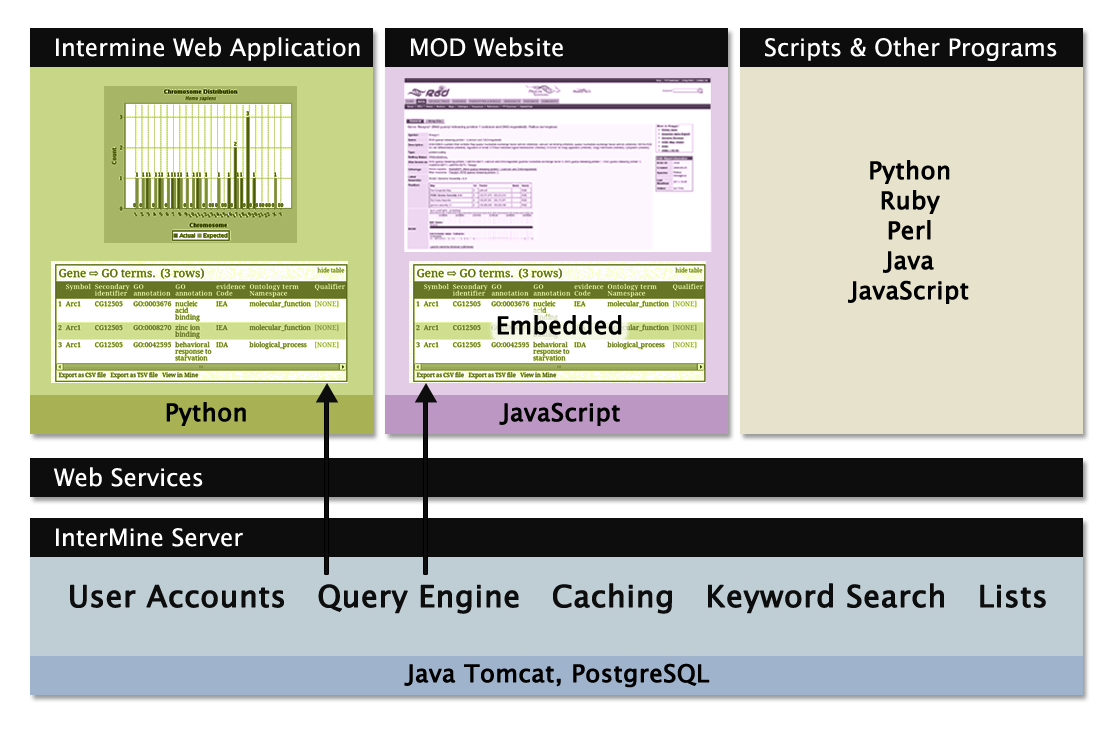
<style>
.page{position:relative;width:1110px;height:739px;background:#ffffff}
.page>*{position:absolute;margin:0}
.t1{font:24px "LucidaGrande";color:#ffffff}
.t2{font:24px/30px "LucidaGrande";color:#000000;font-weight:bold}
.t3{font:24px "LucidaGrande";color:#000000;font-weight:bold}
.t4{font:30px "LucidaGrande";color:#0d0d0d;font-weight:bold}
</style>
<div class="page">
<p class="t1" style="left:56px;top:37px;width:304px;height:24px">Intermine Web Application</p>
<p class="t1" style="left:411px;top:37px;width:152px;height:20px">MOD Website</p>
<p class="t1" style="left:765px;top:37px;width:292px;height:24px">Scripts &amp; Other Programs</p>
<p class="t2" style="left:848px;top:160px;width:121px;height:144px;text-align:center">Python<br>Ruby<br>Perl<br>Java<br>JavaScript</p>
<p class="t3" style="left:497px;top:315px;width:125px;height:20px">Embedded</p>
<p class="t3" style="left:166px;top:402px;width:80px;height:24px">Python</p>
<p class="t3" style="left:499px;top:402px;width:121px;height:24px">JavaScript</p>
<p class="t1" style="left:54px;top:467px;width:149px;height:20px">Web Services</p>
<p class="t1" style="left:56px;top:528px;width:187px;height:19px">InterMine Server</p>
<p class="t4" style="left:70px;top:583px;width:976px;height:31px">User Accounts   Query Engine   Caching   Keyword Search   Lists</p>
<p class="t3" style="left:404px;top:663px;width:306px;height:25px">Java Tomcat, PostgreSQL</p>
</div>
